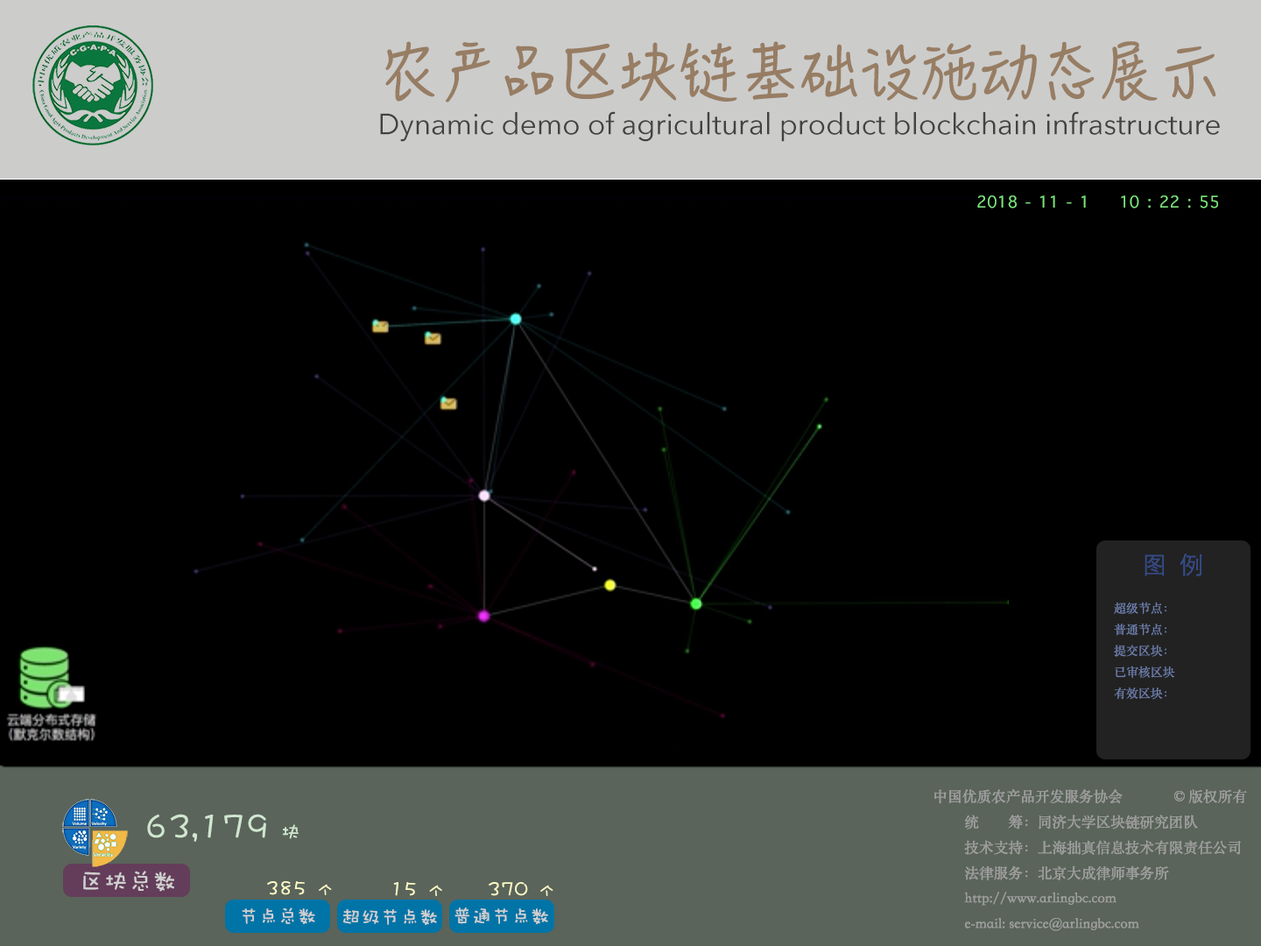
<style>
.page{position:relative;width:1261px;height:946px;background:#000000}
.page>*{position:absolute;margin:0}
.t1{font:58.4px "HanziPenSC-W5";color:#977d63}
.t2{font:29.2px "AvenirNext-Regular";color:#424242}
.t3{font:21.9px "AppleSymbols";color:#7ce67c}
.t4{font:24.3px "STHeitiSC-Light";color:#364b89}
.t5{font:12.2px "STSongti-SC-Regular";color:#6f80af}
.t6{font:14.6px "STSongti-SC-Regular";color:#9c9c9c}
.t7{font:34.1px "DFWaWaSC-W5";color:#d0e6d0}
.t8{font:19.5px "DFWaWaSC-W5";color:#d0e6d0}
.t9{font:24.3px "DFWaWaSC-W5";color:#d0d0d0}
.t10{font:19.5px "DFWaWaSC-W5";color:#fcf8c6}
.t11{font:14.6px "DFWaWaSC-W5";color:#fcf8c6}
.t12{font:19.5px "DFWaWaSC-W5";color:#d0d0d0}
</style>
<div class="page">
<p class="t1" style="left:385px;top:41px;width:831px;height:61px">农产品区块链基础设施动态展示</p>
<p class="t2" style="left:380px;top:111px;width:840px;height:31px">Dynamic demo of agricultural product blockchain infrastructure</p>
<p class="t3" style="left:977px;top:195px;width:241px;height:13px">2018 - 11 - 1    10 : 22 : 55</p>
<p class="t4" style="left:1144px;top:553px;width:58px;height:23px">图  例</p>
<p class="t5" style="left:1114px;top:602px;width:61px;height:98px">超级节点：<br>普通节点：<br>提交区块：<br>已审核区块<br>有效区块：</p>
<p class="t6" style="left:934px;top:789px;width:313px;height:142px">中国优质农产品开发服务协会              ©️ 版权所有<br> 统        筹：同济大学区块链研究团队<br> 技术支持：上海拙真信息技术有限责任公司<br> 法律服务：北京大成律师事务所<br> http://www.arlingbc.com<br> e-mail: service@arlingbc.com</p>
<p class="t6" style="left:934px;top:789px;width:313px;height:142px">中国优质农产品开发服务协会              ©️ 版权所有<br> 统        筹：同济大学区块链研究团队<br> 技术支持：上海拙真信息技术有限责任公司<br> 法律服务：北京大成律师事务所<br> http://www.arlingbc.com<br> e-mail: service@arlingbc.com</p>
<p class="t7" style="left:147px;top:813px;width:152px;height:28px">63,179 <span class="t8">块</span></p>
<p class="t9" style="left:83px;top:870px;width:92px;height:21px">区块总数</p>
<p class="t10" style="left:267px;top:881px;width:65px;height:14px">385 <span class="t11">个</span></p>
<p class="t10" style="left:393px;top:882px;width:49px;height:14px">15 <span class="t11">个</span></p>
<p class="t10" style="left:489px;top:882px;width:64px;height:14px">370 <span class="t11">个</span></p>
<p class="t12" style="left:242px;top:907px;width:73px;height:17px">节点总数</p>
<p class="t12" style="left:342px;top:909px;width:95px;height:16px">超级节点数</p>
<p class="t12" style="left:454px;top:907px;width:94px;height:17px">普通节点数</p>
</div>
